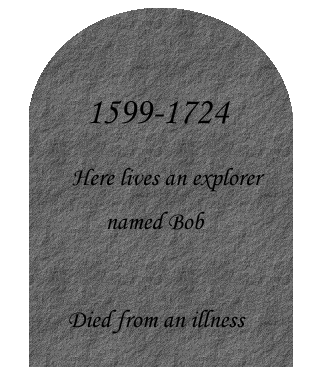
<style>
.page{position:relative;width:321px;height:378px;background:#595959}
.page>*{position:absolute;margin:0}
.t1{font:37.5px "MonotypeCorsiva";color:#000000}
.t2{font:25px "MonotypeCorsiva";color:#000000}
</style>
<div class="page">
<p class="t1" style="left:89px;top:100px;width:141px;height:24px">1599-1724</p>
<p class="t2" style="left:72px;top:167px;width:193px;height:63px">Here lives an explorer <br>      named Bob</p>
<p class="t2" style="left:69px;top:309px;width:177px;height:25px">Died from an illness</p>
</div>
